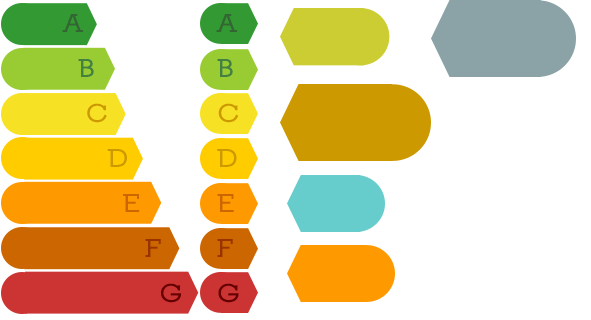
<style>
.page{position:relative;width:591px;height:320px;background:#ffffff}
.page>*{position:absolute;margin:0}
.t1{font:28px/45px "Nilland-SmallCaps-Bold";color:#cc9900}
.t2{font:28px/45px "Nilland-SmallCaps-Bold";color:#336633}
.t3{font:28px/45px "Nilland-SmallCaps-Bold";color:#428142}
.t4{font:28px/45px "Nilland-SmallCaps-Bold";color:#cc6600}
.t5{font:28px/45px "Nilland-SmallCaps-Bold";color:#993300}
.t6{font:28px/45px "Nilland-SmallCaps-Bold";color:#660000}
</style>
<div class="page">
<p class="t1" style="left:216px;top:14px;width:23px;height:289px"><span class="t2">A<br></span><span class="t3">B<br></span>C<br>D<br><span class="t4">E<br></span><span class="t5">F<br></span><span class="t6">G</span></p>
</div>
